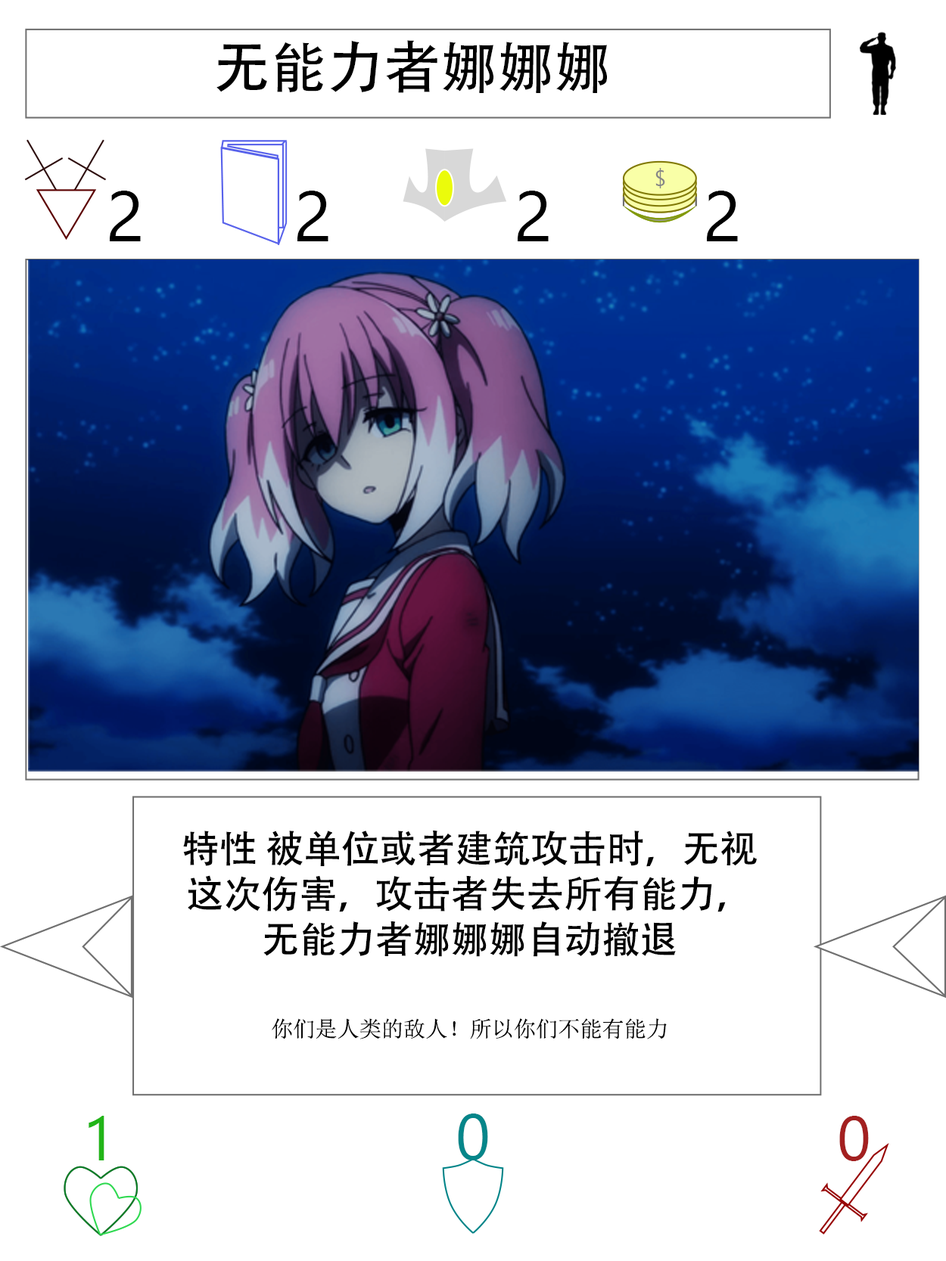
<style>
.page{position:relative;width:946px;height:1261px;background:#ffffff}
.page>*{position:absolute;margin:0}
.t1{font:56.7px "AdobeHeitiStd-Regular";color:#000000}
.t2{font:70.9px "SegoeUI";color:#000000}
.t3{font:37.8px "AdobeHeitiStd-Regular";color:#000000}
.t4{font:22.1px "NSimSun";color:#000000}
.t5{font:63px "SegoeUI";color:#22b518}
.t6{font:64.6px "SegoeUI";color:#05868a}
.t7{font:63px "SegoeUI";color:#a32020}
</style>
<div class="page">
<p class="t1" style="left:216px;top:40px;width:391px;height:53px">无能力者娜娜娜</p>
<p class="t2" style="left:110px;top:191px;width:31px;height:50px">2</p>
<p class="t2" style="left:297px;top:191px;width:31px;height:50px">2</p>
<p class="t2" style="left:517px;top:191px;width:31px;height:50px">2</p>
<p class="t2" style="left:707px;top:191px;width:31px;height:50px">2</p>
<p class="t3" style="left:183px;top:830px;width:573px;height:209px;text-align:center">特性 被单位或者建筑攻击时，无视这次伤害，攻击者失去所有能力，无能力者娜娜娜自动撤退<br><br><span class="t4">你们是人类的敌人！所以你们不能有能力</span></p>
<p class="t5" style="left:89px;top:1116px;width:15px;height:44px">1</p>
<p class="t6" style="left:458px;top:1114px;width:30px;height:46px">0</p>
<p class="t7" style="left:839px;top:1116px;width:29px;height:45px">0</p>
</div>
